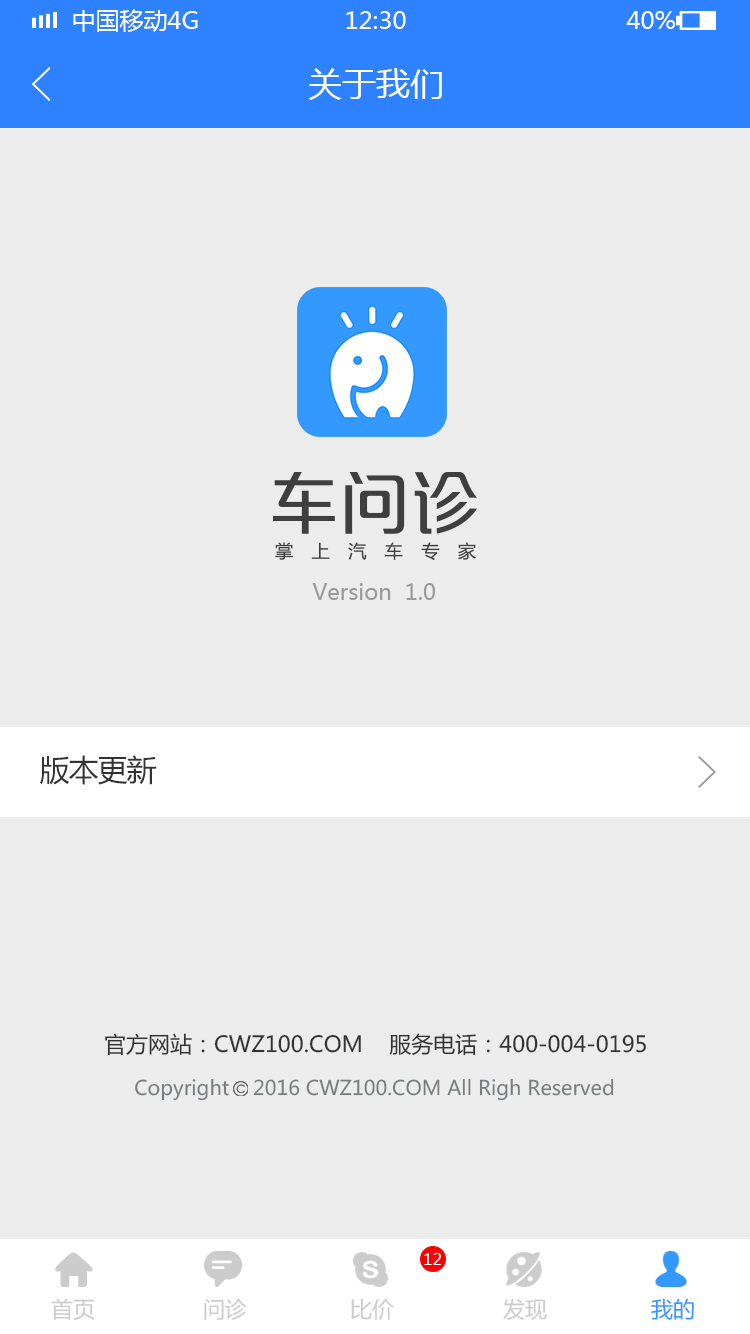
<style>
.page{position:relative;width:750px;height:1334px;background:#ececec}
.page>*{position:absolute;margin:0}
.t1{font:24px "MicrosoftYaHei";color:#ffffff;text-transform:uppercase}
.t2{font:34px "MicrosoftYaHei";color:#ffffff}
.t3{font:22px "MicrosoftYaHei";color:#999999}
.t4{font:30px "MicrosoftYaHei";letter-spacing:-0.032em;color:#333333}
.t5{font:22px "MicrosoftYaHei";color:#333333}
.t6{font:20px "MicrosoftYaHei";color:#787e7f}
.t7{font:16px "MicrosoftYaHei";color:#ffffff}
.t8{font:22px "MicrosoftYaHei";color:#cccccc}
.t9{font:22px "MicrosoftYaHei";color:#3399ff}
</style>
<div class="page">
<p class="t1" style="left:73px;top:9px;width:125px;height:23px">中国移动4G</p>
<p class="t1" style="left:346px;top:11px;width:60px;height:18px">12:30</p>
<p class="t1" style="left:626px;top:11px;width:49px;height:18px">40%</p>
<p class="t2" style="left:308px;top:68px;width:134px;height:32px">关于我们</p>
<p class="t3" style="left:312px;top:583px;width:123px;height:17px">Version  1.0</p>
<p class="t4" style="left:40px;top:755px;width:117px;height:30px">版本更新</p>
<p class="t5" style="left:105px;top:1033px;width:541px;height:23px">官方网站：CWZ100.COM    服务电话：400-004-0195</p>
<p class="t6" style="left:135px;top:1078px;width:94px;height:23px">Copyright</p>
<p class="t6" style="left:253px;top:1078px;width:361px;height:23px">2016 CWZ100.COM All Righ Reserved</p>
<p class="t7" style="left:424px;top:1253px;width:17px;height:12px">12</p>
<p class="t8" style="left:51px;top:1298px;width:44px;height:22px">首页</p>
<p class="t8" style="left:204px;top:1298px;width:43px;height:22px">问诊</p>
<p class="t8" style="left:351px;top:1298px;width:43px;height:22px">比价</p>
<p class="t8" style="left:503px;top:1298px;width:44px;height:22px">发现</p>
<p class="t9" style="left:651px;top:1298px;width:43px;height:22px">我的</p>
</div>
